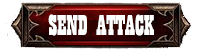
<style>
.page{position:relative;width:200px;height:50px;background:#ffffff}
.page>*{position:absolute;margin:0}
.t1{font:30px "Playbill";color:#ffffff}
</style>
<div class="page">
<p class="t1" style="left:48px;top:14px;width:106px;height:22px">SEND ATTACK</p>
</div>
